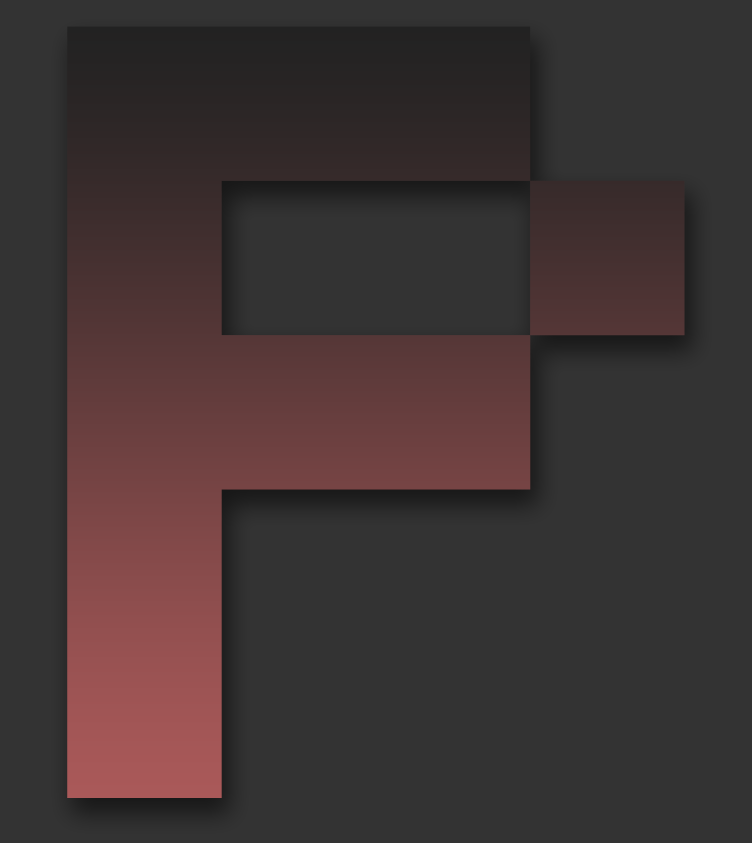
<style>
.page{position:relative;width:752px;height:843px;background:#333333}
.page>*{position:absolute;margin:0}
.t1{font:1296px "Silkscreen"}
</style>
<div class="page">
<p class="t1" style="left:67px;top:26px;width:618px;height:772px">P</p>
</div>
